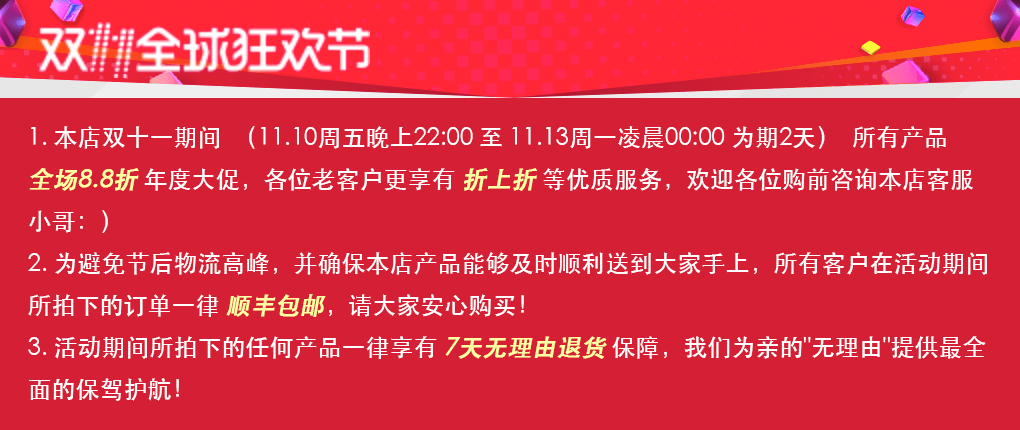
<style>
.page{position:relative;width:1020px;height:430px;background:#d51f34}
.page>*{position:absolute;margin:0}
.t1{font:24px "STHeiti";color:#ffffff}
.t2{font:24px "STHeiti";color:#ffffa4;font-weight:bold;font-style:italic}
</style>
<div class="page">
<p class="t1" style="left:28px;top:126px;width:959px;height:275px">1. 本店双十一期间  （11.10周五晚上22:00 至 11.13周一凌晨00:00 为期2天）  所有产品<br><span class="t2">全场8.8折 </span>年度大促，各位老客户更享有 <span class="t2">折上折</span> 等优质服务，欢迎各位购前咨询本店客服<br>小哥：）<br>2. 为避免节后物流高峰，并确保本店产品能够及时顺利送到大家手上，所有客户在活动期间<br>所拍下的订单一律 <span class="t2">顺丰包邮</span>，请大家安心购买！<br>3. 活动期间所拍下的任何产品一律享有 <span class="t2">7天无理由退货</span> 保障，我们为亲的"无理由"提供最全<br>面的保驾护航！</p>
</div>
